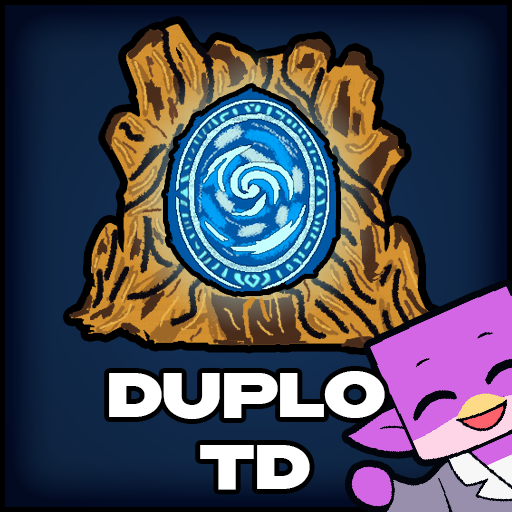
<style>
.page{position:relative;width:512px;height:512px}
.page>*{position:absolute;margin:0}
.t1{font:60px "Benzin-ExtraBold";color:#ffffff}
</style>
<div class="page">
<p class="t1" style="left:109px;top:371px;width:276px;height:119px;text-align:center">DUPLO <br>TD</p>
</div>
